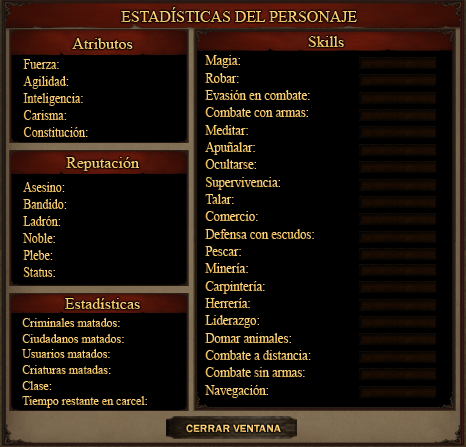
<style>
.page{position:relative;width:466px;height:447px;background:#000000}
.page>*{position:absolute;margin:0}
.t1{font:16.3px "TimesNewRomanPSMT";color:#fbcb69}
.t2{font:16px "TimesNewRomanPSMT";color:#f8c868}
.t3{font:16px "TimesNewRomanPSMT"}
.t4{font:14.1px "TimesNewRomanPSMT";color:#f9c968;scale:0.85 1}
.t5{font:14.5px "TimesNewRomanPSMT";scale:0.88 1}
.t6{font:14.1px "TimesNewRomanPSMT";scale:0.85 1}
.t7{font:16px "TimesNewRomanPSMT";color:#faca69}
.t8{font:13px "TimesNewRomanPSMT";scale:0.92 1}
.t9{font:11px "FranklinGothic-Demi";scale:1.07 1}
</style>
<div class="page">
<p class="t1" style="left:121px;top:7px;width:236px;height:15px">ESTADÍSTICAS DEL PERSONAJE</p>
<p class="t2" style="left:72px;top:38px;width:61px;height:11px">Atributos</p>
<p class="t3" style="left:308px;top:36px;width:36px;height:11px">Skills</p>
<p class="t4" style="left:23px;top:59px;width:65px;height:78px">Fuerza:<br>Agilidad:<br>Inteligencia:<br>Carisma:<br>Constitución:</p>
<p class="t5" style="left:205px;top:55px;width:109px;height:343px">Magia:<br>Robar:<br>Evasión en combate:<br>Combate con armas:<br>Meditar:<br>Apuñalar:<br>Ocultarse:<br>Supervivencia:<br>Talar:<br>Comercio:<br>Defensa con escudos:<br>Pescar:<br>Minería:<br>Carpintería:<br>Herrería:<br>Liderazgo:<br>Domar animales:<br>Combate a distancia:<br>Combate sin armas:<br>Navegación:</p>
<p class="t3" style="left:66px;top:157px;width:73px;height:14px">Reputación</p>
<p class="t6" style="left:23px;top:182px;width:44px;height:95px">Asesino:<br>Bandido:<br>Ladrón:<br>Noble:<br>Plebe:<br>Status:</p>
<p class="t7" style="left:65px;top:298px;width:75px;height:11px">Estadísticas</p>
<p class="t8" style="left:22px;top:318px;width:125px;height:90px">Criminales matados:<br>Ciudadanos matados:<br>Usuarios matados:<br>Criaturas matadas:<br>Clase:<br>Tiempo restante en carcel:</p>
<p class="t9" style="left:186px;top:424px;width:95px;height:9px">CERRAR VENTANA</p>
</div>
